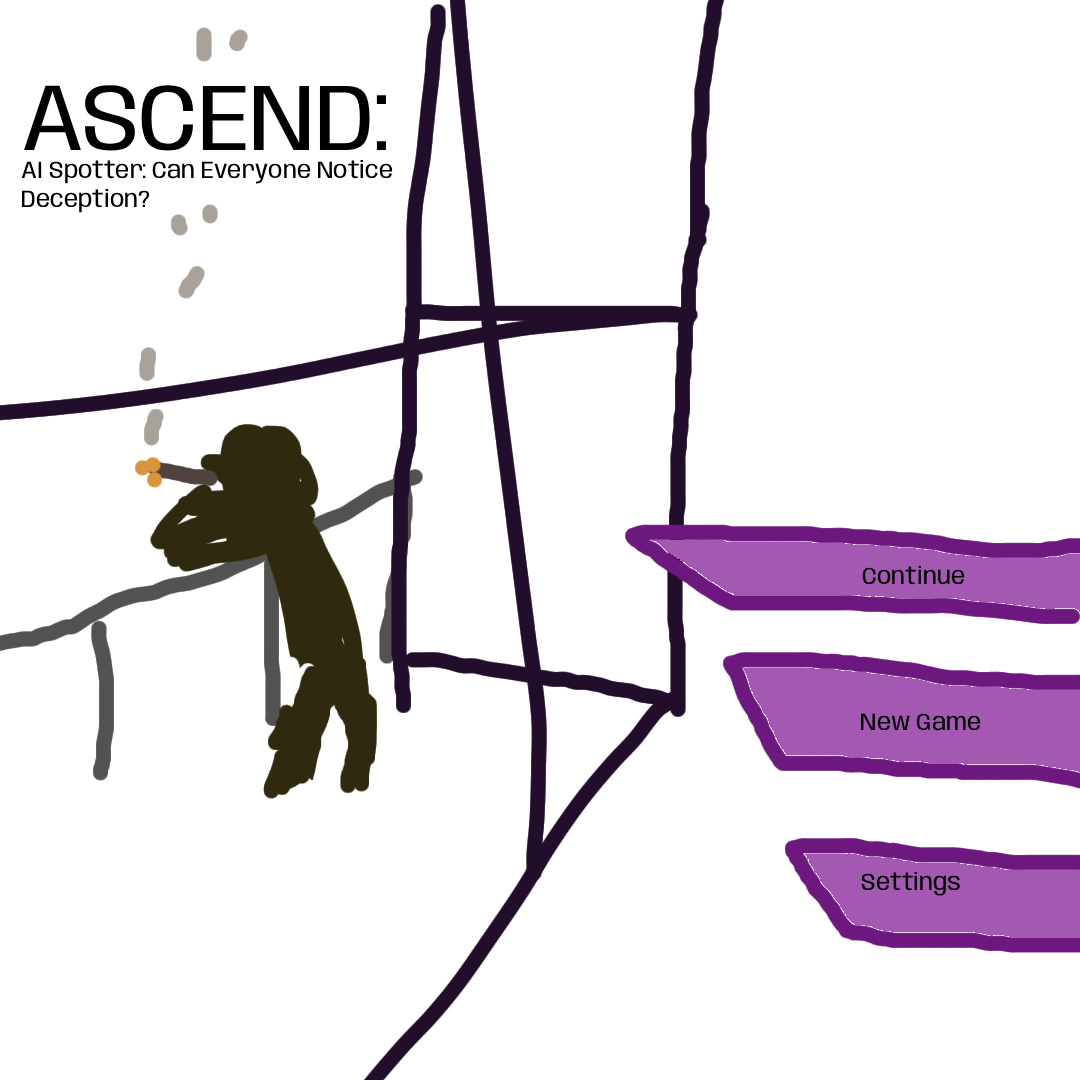
<style>
.page{position:relative;width:1080px;height:1080px;background:#ffffff}
.page>*{position:absolute;margin:0}
.t1{font:24px "Anybody-Regular";color:#000000}
.t2{font:95px "Anybody-Regular";color:#000000}
</style>
<div class="page">
<p class="t1" style="left:21px;top:85px;width:372px;height:128px"><span class="t2">ASCEND: <br></span>AI Spotter: Can Everyone Notice Deception?</p>
<p class="t1" style="left:862px;top:565px;width:103px;height:20px">Continue</p>
<p class="t1" style="left:861px;top:713px;width:120px;height:18px">New Game</p>
<p class="t1" style="left:861px;top:871px;width:99px;height:25px">Settings</p>
</div>
